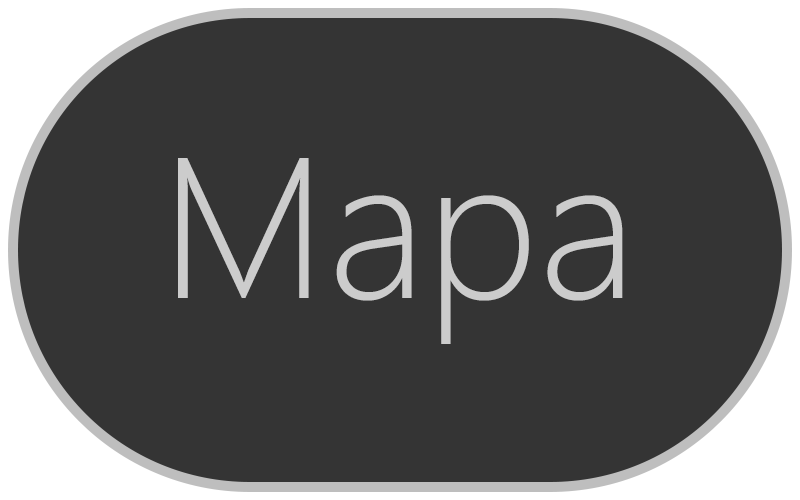
<style>
.page{position:relative;width:800px;height:500px;background:#343434}
.page>*{position:absolute;margin:0}
.t1{font:200px "SegoeUI-Light";color:#cccccc}
</style>
<div class="page">
<p class="t1" style="left:178px;top:158px;width:445px;height:186px">Mapa</p>
</div>
